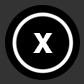
<style>
.page{position:relative;width:84px;height:84px;background:#000000}
.page>*{position:absolute;margin:0}
.t1{font:35.8px "Helvetica-Bold";color:#ffffff}
</style>
<div class="page">
<p class="t1" style="left:33px;top:33px;width:20px;height:20px">x</p>
</div>
